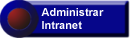
<style>
.page{position:relative;width:130px;height:38px;background:#06068a}
.page>*{position:absolute;margin:0}
.t1{font:11px "Arial-BoldMT";color:#ffffff}
</style>
<div class="page">
<p class="t1" style="left:41px;top:8px;width:63px;height:21px">Administrar<br>Intranet</p>
</div>
